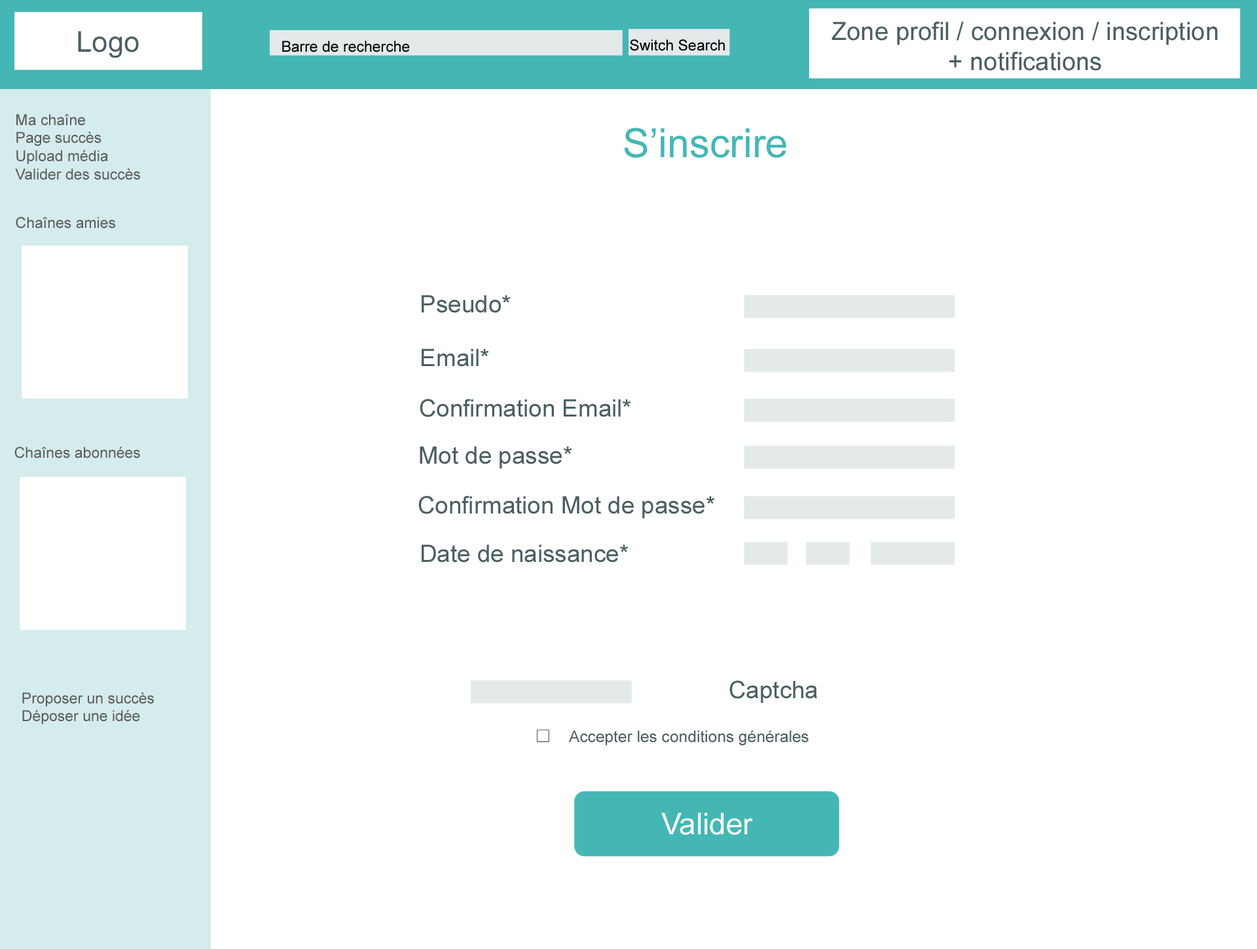
<style>
.page{position:relative;width:1257px;height:949px;background:#ffffff}
.page>*{position:absolute;margin:0}
.t1{font:25.1px "ArialMT";color:#4b5f63}
.t2{font:28.4px "ArialMT";color:#4b5f63}
.t3{font:15.1px "ArialMT";color:#000000}
.t4{font:15.1px "ArialMT";color:#5d5c5c}
.t5{font:40.2px "ArialMT";color:#44b7b5}
.t6{font:24.1px "ArialMT";color:#4b5f63}
.t7{font:16.1px "ArialMT";color:#4b5f63}
.t8{font:30.1px "ArialMT";color:#ffffff}
</style>
<div class="page">
<p class="t1" style="left:831px;top:22px;width:387px;height:49px;text-align:center">Zone profil / connexion / inscription<br>+ notifications</p>
<p class="t2" style="left:78px;top:31px;width:61px;height:27px">Logo</p>
<p class="t3" style="left:282px;top:41px;width:128px;height:11px">Barre de recherche</p>
<p class="t3" style="left:630px;top:39px;width:95px;height:12px">Switch Search</p>
<p class="t4" style="left:15px;top:114px;width:125px;height:66px">Ma chaîne<br>Page succès<br>Upload média<br>Valider des succès</p>
<p class="t5" style="left:624px;top:128px;width:162px;height:30px">S’inscrire</p>
<p class="t4" style="left:16px;top:217px;width:99px;height:11px">Chaînes amies</p>
<p class="t6" style="left:422px;top:295px;width:89px;height:18px">Pseudo*</p>
<p class="t6" style="left:422px;top:348px;width:67px;height:19px">Email*</p>
<p class="t6" style="left:420px;top:399px;width:211px;height:18px">Confirmation Email*</p>
<p class="t4" style="left:14px;top:446px;width:126px;height:12px">Chaînes abonnées</p>
<p class="t6" style="left:420px;top:446px;width:152px;height:23px">Mot de passe*</p>
<p class="t6" style="left:418px;top:496px;width:297px;height:23px">Confirmation Mot de passe*</p>
<p class="t6" style="left:422px;top:544px;width:206px;height:18px">Date de naissance*</p>
<p class="t6" style="left:729px;top:680px;width:88px;height:23px">Captcha</p>
<p class="t4" style="left:22px;top:692px;width:132px;height:32px">Proposer un succès<br>Déposer une idée</p>
<p class="t7" style="left:569px;top:730px;width:240px;height:15px">Accepter les conditions générales</p>
<p class="t8" style="left:661px;top:812px;width:92px;height:23px">Valider</p>
</div>
